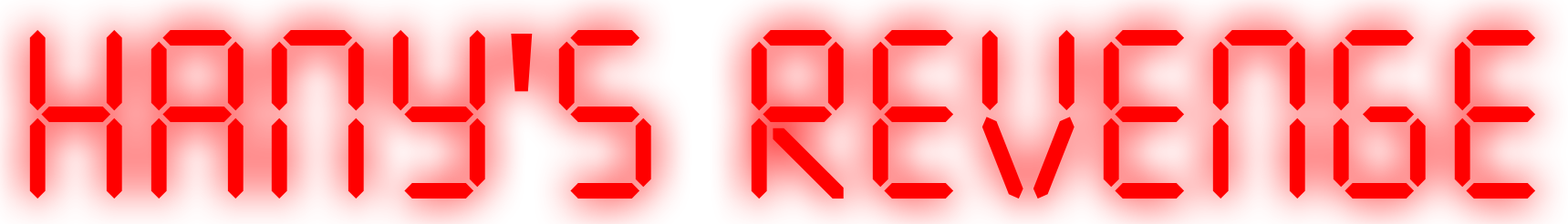
<style>
.page{position:relative;width:1568px;height:224px}
.page>*{position:absolute;margin:0}
.t1{font:240.8px "SevenSegmentRegular";color:#ff0000}
.t2{font:240.8px "MyriadPro-Regular";color:#ff0000}
</style>
<div class="page">
<p class="t1" style="left:29px;top:30px;width:1507px;height:170px">hany<span class="t2">'</span>s revenge</p>
</div>
